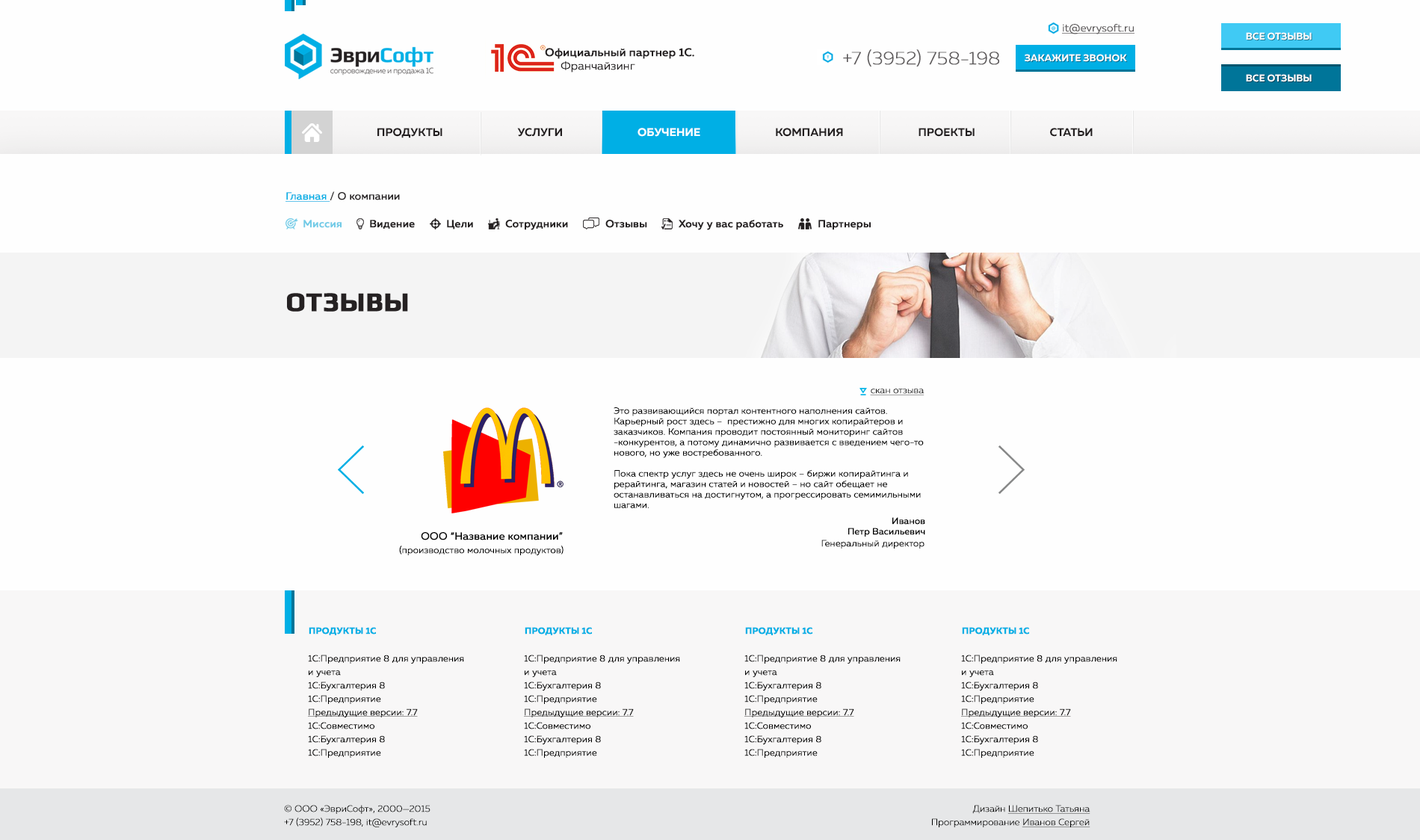
<style>
.page{position:relative;width:1420px;height:840px;background:#fefefe}
.page>*{position:absolute;margin:0}
.t1{font:10.5px "MullerLight";color:#5c595a;font-weight:bold;text-decoration:underline}
.t2{font:9.8px "MullerBold";color:#ffffff}
.t3{font:11.2px/13.5px "MullerMedium";color:#231f20;font-weight:bold}
.t4{font:11.2px/13.5px "MullerLight";color:#231f20;font-weight:bold}
.t5{font:18.3px "MullerUltraLight";color:#5c595a;font-weight:bold}
.t6{font:11.2px "MullerBold";color:#231f20}
.t7{font:11.2px "MullerBold";color:#ffffff}
.t8{font:10.5px "MullerRegular";color:#252122;font-weight:bold}
.t9{font:10.5px "MullerRegular";color:#00afe5;font-weight:bold;text-decoration:underline}
.t10{font:10.5px "MullerMedium";color:#72cbe7;font-weight:bold}
.t11{font:10.5px "MullerMedium";color:#231f20;font-weight:bold}
.t12{font:26.9px "Play-Bold";color:#252122;font-weight:bold}
.t13{font:9px "MullerUltraLight";color:#000000;font-weight:bold;text-decoration:underline}
.t14{font:9px/10.5px "MullerLight";color:#000000;font-weight:bold}
.t15{font:9px/10.5px "MullerRegular";color:#000000;font-weight:bold}
.t16{font:10.5px "MullerRegular";color:#000000;font-weight:bold}
.t17{font:9px "MullerLight";color:#000000;font-weight:bold}
.t18{font:9px "MullerBold";color:#00afe5;font-weight:bold}
.t19{font:9px/13.5px "MullerLight";color:#000000;font-weight:bold}
.t20{font:9px/13.5px "MullerLight";color:#000000;font-weight:bold;text-decoration:underline}
.t21{font:9px/13.5px "MullerUltraLight";color:#000000;font-weight:bold}
.t22{font:9px/13.5px "MullerUltraLight";color:#000000;font-weight:bold;text-decoration:underline}
</style>
<div class="page">
<p class="t1" style="left:1062px;top:24px;width:72px;height:10px">it@evrysoft.ru</p>
<p class="t2" style="left:1246px;top:32px;width:65px;height:8px">ВСЕ ОТЗЫВЫ</p>
<p class="t3" style="left:545px;top:48px;width:149px;height:24px">Официальный партнер 1С.<span class="t4"> <br>     Франчайзинг</span></p>
<p class="t5" style="left:843px;top:49px;width:156px;height:18px">+7 (3952) 758-198</p>
<p class="t2" style="left:1024px;top:54px;width:103px;height:8px">ЗАКАЖИТЕ ЗВОНОК</p>
<p class="t2" style="left:1246px;top:74px;width:65px;height:8px">ВСЕ ОТЗЫВЫ</p>
<p class="t6" style="left:377px;top:128px;width:715px;height:10px">ПРОДУКТЫ                              УСЛУГИ                         <span class="t7">     ОБУЧЕНИЕ</span>                              КОМПАНИЯ                              ПРОЕКТЫ                              СТАТЬИ</p>
<p class="t8" style="left:285px;top:191px;width:115px;height:11px"><span class="t9">Главная </span>/ О компании</p>
<p class="t10" style="left:303px;top:220px;width:38px;height:8px">Миссия</p>
<p class="t11" style="left:370px;top:220px;width:45px;height:9px">Видение</p>
<p class="t11" style="left:447px;top:220px;width:26px;height:9px">Цели</p>
<p class="t11" style="left:505px;top:220px;width:63px;height:10px">Сотрудники</p>
<p class="t11" style="left:605px;top:220px;width:42px;height:8px">Отзывы</p>
<p class="t11" style="left:678px;top:220px;width:105px;height:10px">Хочу у вас работать</p>
<p class="t11" style="left:818px;top:220px;width:53px;height:10px">Партнеры</p>
<p class="t12" style="left:287px;top:293px;width:121px;height:19px">ОТЗЫВЫ</p>
<p class="t13" style="left:870px;top:389px;width:54px;height:6px">скан отзыва</p>
<p class="t14" style="left:613px;top:407px;width:311px;height:101px">Это развивающийся портал контентного наполнения сайтов. Карьерный рост здесь –  престижно для многих копирайтеров и заказчиков. Компания проводит постоянный мониторинг сайтов -конкурентов, а потому динамично развивается с введением чего-то нового, но уже востребованного. <br><br>Пока спектр услуг здесь не очень широк – биржи копирайтинга и рерайтинга, магазин статей и новостей – но сайт обещает не останавливаться на достигнутом, а прогрессировать семимильными шагами.</p>
<p class="t15" style="left:848px;top:517px;width:77px;height:20px;text-align:right">Иванов<br>Петр Васильевич</p>
<p class="t16" style="left:421px;top:532px;width:142px;height:8px">ООО “Название компании”</p>
<p class="t17" style="left:399px;top:545px;width:164px;height:10px">(производство молочных продуктов)</p>
<p class="t17" style="left:821px;top:540px;width:103px;height:8px">Генеральный директор</p>
<p class="t18" style="left:309px;top:627px;width:67px;height:8px">ПРОДУКТЫ 1С</p>
<p class="t18" style="left:525px;top:627px;width:67px;height:8px">ПРОДУКТЫ 1С</p>
<p class="t18" style="left:745px;top:627px;width:67px;height:8px">ПРОДУКТЫ 1С</p>
<p class="t18" style="left:962px;top:627px;width:67px;height:8px">ПРОДУКТЫ 1С</p>
<p class="t19" style="left:308px;top:655px;width:156px;height:103px">1С:Предприятие 8 для управления и учета<br>1С:Бухгалтерия 8 <br>1С:Предприятие <br><span class="t20">Предыдущие версии: 7.7<br></span>1С:Совместимо<br>1С:Бухгалтерия 8 <br>1С:Предприятие</p>
<p class="t19" style="left:524px;top:655px;width:156px;height:103px">1С:Предприятие 8 для управления и учета<br>1С:Бухгалтерия 8 <br>1С:Предприятие <br><span class="t20">Предыдущие версии: 7.7<br></span>1С:Совместимо<br>1С:Бухгалтерия 8 <br>1С:Предприятие</p>
<p class="t19" style="left:744px;top:655px;width:156px;height:103px">1С:Предприятие 8 для управления и учета<br>1С:Бухгалтерия 8 <br>1С:Предприятие <br><span class="t20">Предыдущие версии: 7.7<br></span>1С:Совместимо<br>1С:Бухгалтерия 8 <br>1С:Предприятие</p>
<p class="t19" style="left:961px;top:655px;width:156px;height:103px">1С:Предприятие 8 для управления и учета<br>1С:Бухгалтерия 8 <br>1С:Предприятие <br><span class="t20">Предыдущие версии: 7.7<br></span>1С:Совместимо<br>1С:Бухгалтерия 8 <br>1С:Предприятие</p>
<p class="t21" style="left:284px;top:805px;width:146px;height:22px">© ООО «ЭвриСофт», 2000—2015<br>+7 (3952) 758-198, it@evrysoft.ru</p>
<p class="t22" style="left:932px;top:805px;width:158px;height:22px;text-align:right"><span class="t21">Дизайн </span>Шепитько Татьяна<br><span class="t21">Программирование </span>Иванов Сергей</p>
</div>
